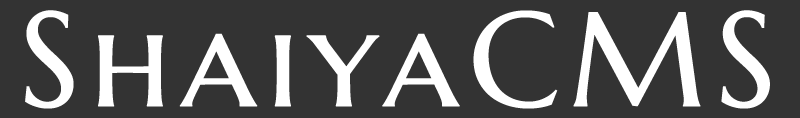
<style>
.page{position:relative;width:800px;height:118px;background:#333333}
.page>*{position:absolute;margin:0}
.t1{font:133.4px "MarcellusSC-Regular";letter-spacing:0.05em;color:#ffffff;font-weight:bold}
</style>
<div class="page">
<p class="t1" style="left:25px;top:10px;width:745px;height:99px">ShaiyaCMS</p>
</div>
